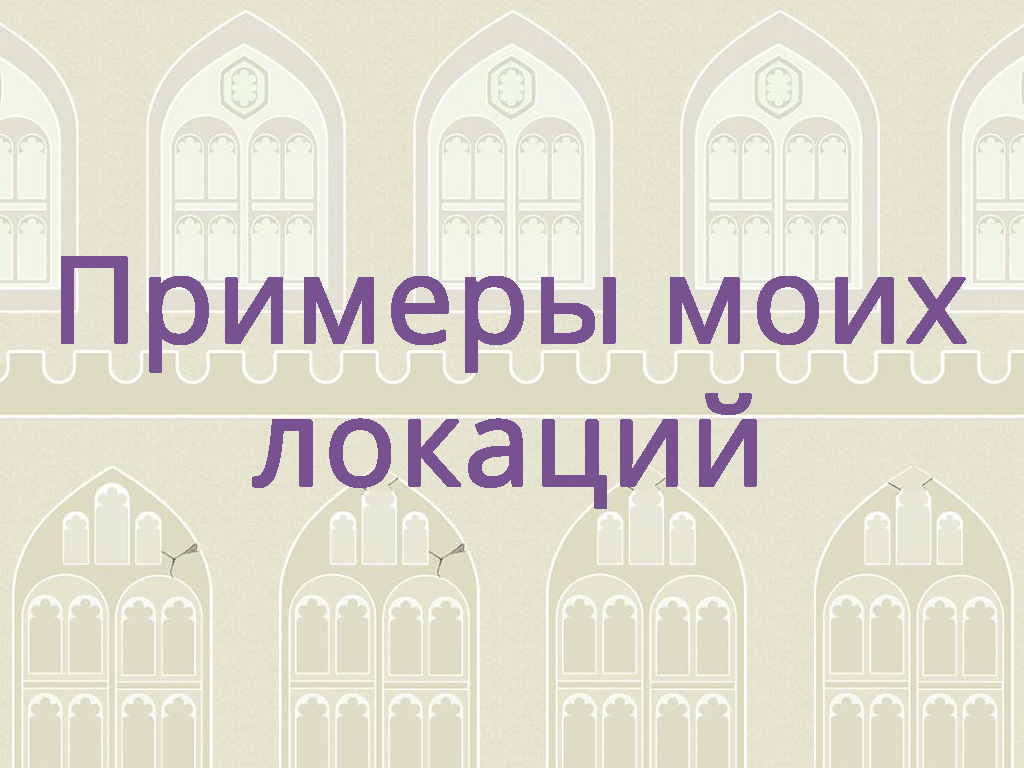
<style>
.page{position:relative;width:1024px;height:768px}
.page>*{position:absolute;margin:0}
.t1{font:119px "OpenSans";color:#785290;font-weight:bold}
</style>
<div class="page">
<p class="t1" style="left:61px;top:256px;width:906px;height:253px;text-align:center">Примеры моих<br>локаций</p>
</div>
